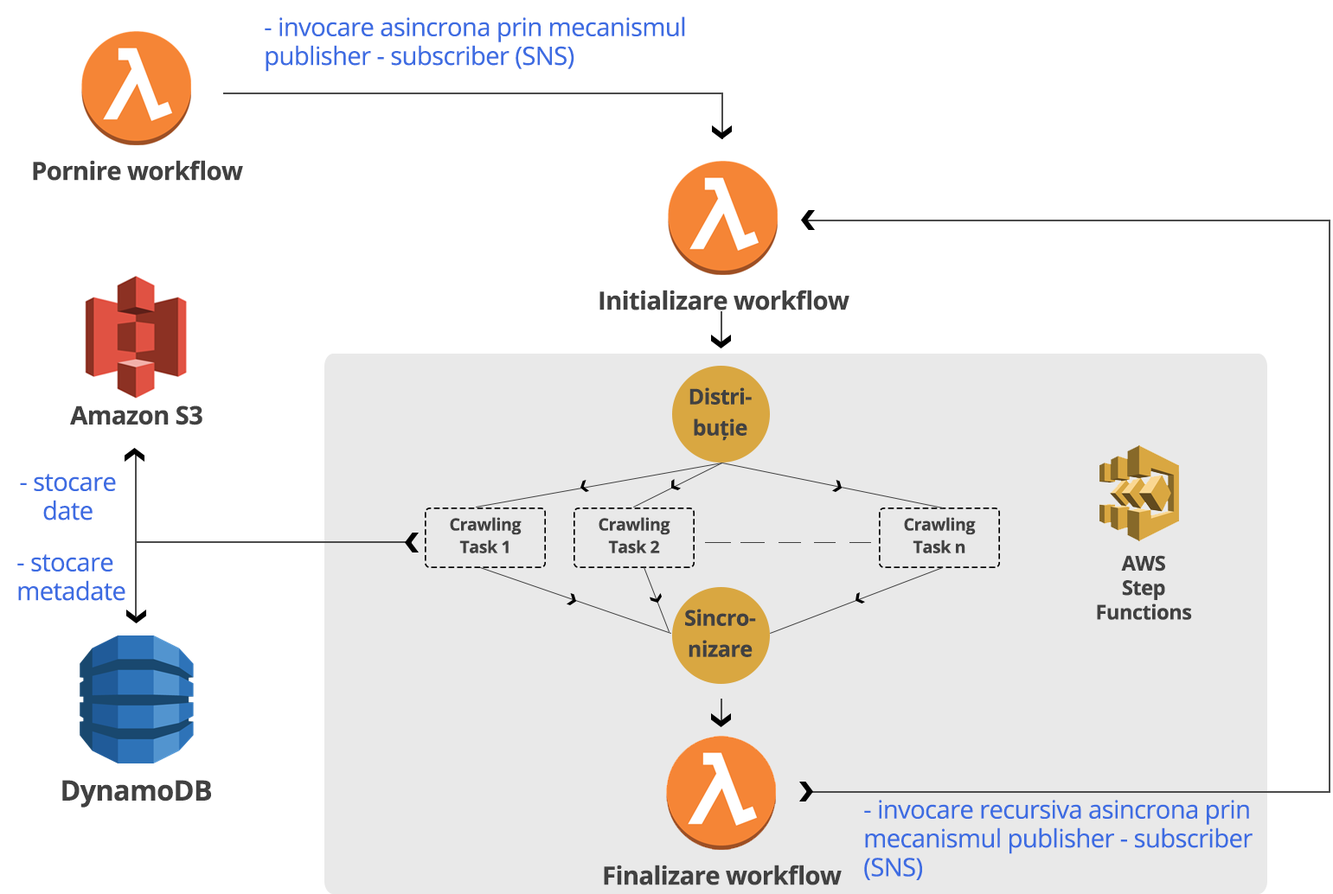
<style>
.page{position:relative;width:1333px;height:894px;background:#ffffff}
.page>*{position:absolute;margin:0}
.t1{font:25.2px/28.8px "OpenSans";letter-spacing:-0.02em;color:#3d6ce2}
.t2{font:25.2px "OpenSans-Bold";letter-spacing:-0.02em;color:#414141}
.t3{font:21.6px/31.1px "OpenSans-Bold";letter-spacing:-0.02em;color:#414141}
.t4{font:16.9px/22.5px "OpenSans-Bold";letter-spacing:-0.02em;color:#414141}
.t5{font:20.4px/24.5px "OpenSans-Bold";letter-spacing:-0.02em;color:#414141}
.t6{font:28px "OpenSans-Bold";letter-spacing:-0.02em;color:#414141}
</style>
<div class="page">
<p class="t1" style="left:265px;top:16px;width:420px;height:56px">- invocare asincrona prin mecanismul<br>publisher - subscriber (SNS)</p>
<p class="t2" style="left:33px;top:160px;width:210px;height:21px">Pornire workflow</p>
<p class="t2" style="left:599px;top:290px;width:251px;height:21px">Initializare workflow</p>
<p class="t3" style="left:689px;top:388px;width:63px;height:53px;text-align:center">Distri-<br>buție</p>
<p class="t2" style="left:70px;top:406px;width:132px;height:20px">Amazon S3</p>
<p class="t1" style="left:20px;top:474px;width:96px;height:47px;text-align:center">- stocare <br>date</p>
<p class="t4" style="left:450px;top:517px;width:72px;height:37px;text-align:center">Crawling <br>Task 1</p>
<p class="t4" style="left:599px;top:517px;width:71px;height:37px;text-align:center">Crawling <br>Task 2</p>
<p class="t4" style="left:904px;top:517px;width:72px;height:37px;text-align:center">Crawling <br>Task n</p>
<p class="t1" style="left:17px;top:555px;width:108px;height:46px">- stocare <br>metadate</p>
<p class="t5" style="left:1097px;top:555px;width:95px;height:65px;text-align:center">AWS <br>Step <br>Functions</p>
<p class="t3" style="left:685px;top:609px;width:71px;height:48px;text-align:center">Sincro-<br>nizare</p>
<p class="t6" style="left:62px;top:780px;width:149px;height:28px">DynamoDB</p>
<p class="t1" style="left:864px;top:800px;width:389px;height:81px">- invocare recursiva asincrona prin mecanismul publisher - subscriber<br>(SNS)</p>
<p class="t2" style="left:604px;top:865px;width:238px;height:21px">Finalizare workflow</p>
</div>
